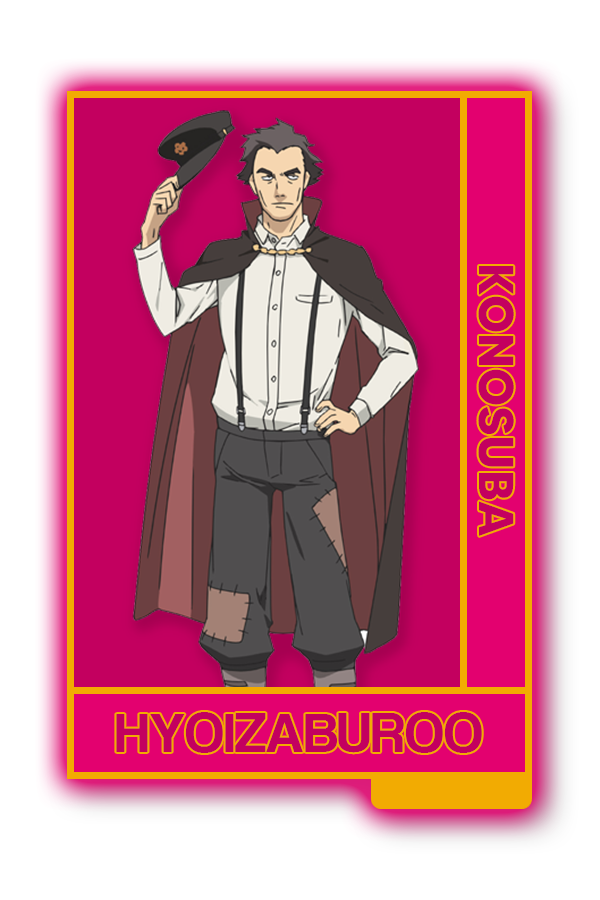
<style>
.page{position:relative;width:600px;height:900px;background:#ffffff}
.page>*{position:absolute;margin:0}
.t1{font:48.8px "MADETOMMY-Bold";color:#c3005f}
.t2{font:58.4px "CoolveticaRg-Regular";color:#c3005f}
</style>
<div class="page">
<p class="t1" style="left:478px;top:266px;width:36px;height:270px;rotate:90deg">KONOSUBA</p>
<p class="t2" style="left:116px;top:712px;width:366px;height:41px">HYOIZABUROO</p>
</div>
